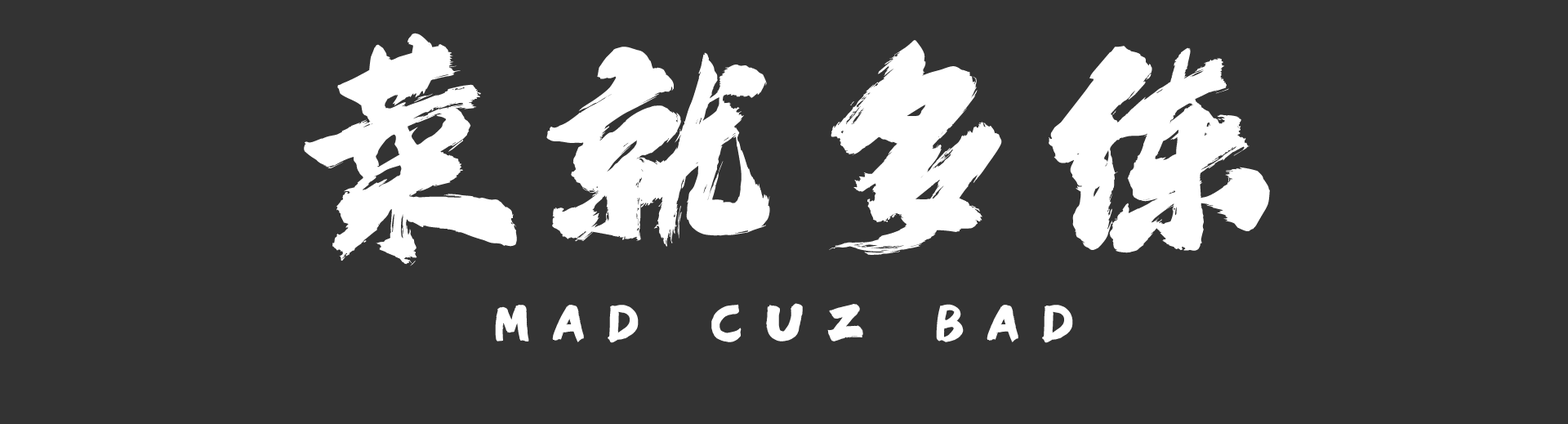
<style>
.page{position:relative;width:1568px;height:424px;background:#333333}
.page>*{position:absolute;margin:0}
.t1{font:252.7px "HelloFont-ID-LongFeiXingShu";color:#ffffff;text-transform:uppercase}
.t2{font:57.5px "HelloFont-ID-LongFeiXingShu";letter-spacing:0.34em;color:#ffffff;text-transform:uppercase}
</style>
<div class="page">
<p class="t1" style="left:304px;top:33px;width:966px;height:233px">菜就多练</p>
<p class="t2" style="left:495px;top:303px;width:578px;height:40px">MAD CUZ BAD</p>
</div>
